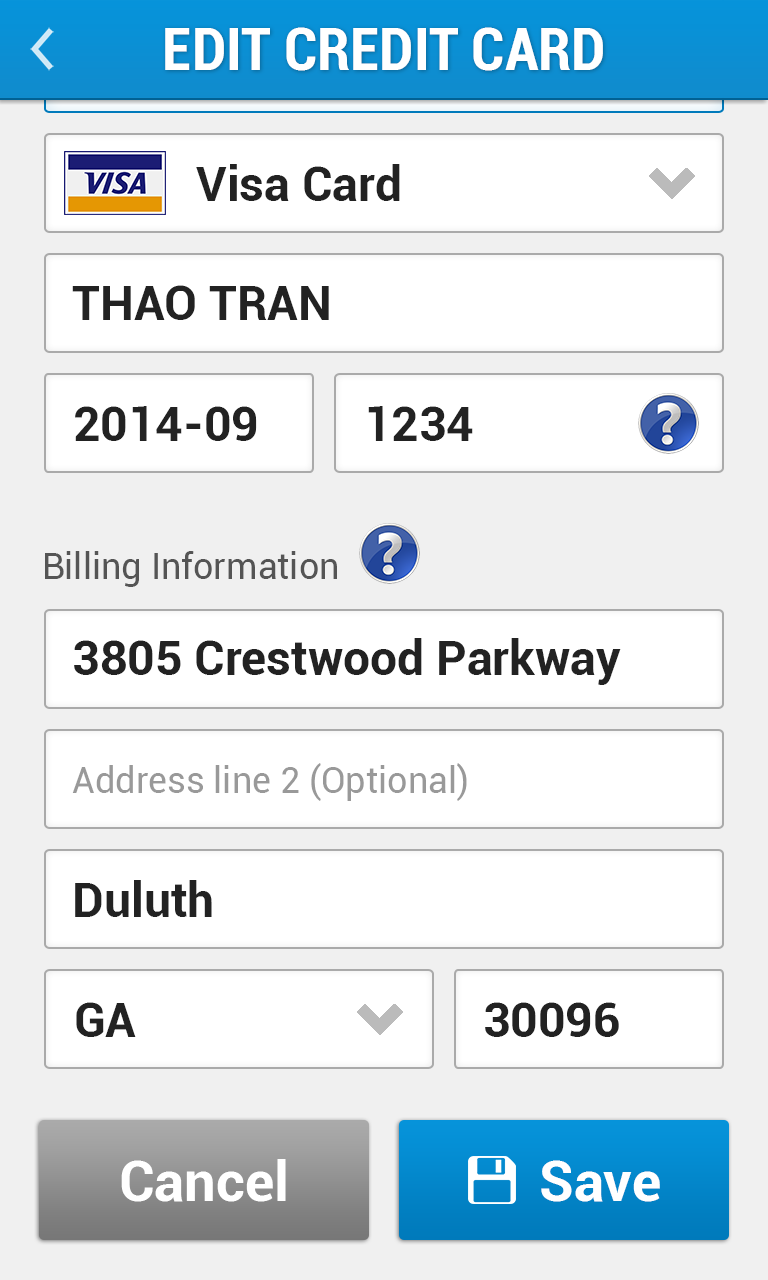
<style>
.page{position:relative;width:768px;height:1280px;background:#f0f0f0}
.page>*{position:absolute;margin:0}
.t1{font:60px "Roboto-BoldCondensed";color:#ffffff}
.t2{font:48px "Roboto-Bold";color:#222222}
.t3{font:36px "Roboto-Regular";color:#555555}
.t4{font:36px "Roboto-Regular";color:#999999}
.t5{font:56px "Roboto-Bold";color:#ffffff}
</style>
<div class="page">
<p class="t1" style="left:165px;top:27px;width:438px;height:44px">EDIT CREDIT CARD</p>
<p class="t2" style="left:196px;top:164px;width:204px;height:37px">Visa Card</p>
<p class="t2" style="left:72px;top:285px;width:257px;height:35px">THAO TRAN</p>
<p class="t2" style="left:75px;top:406px;width:182px;height:35px">2014-09</p>
<p class="t2" style="left:368px;top:406px;width:105px;height:35px">1234</p>
<p class="t3" style="left:45px;top:551px;width:292px;height:36px">Billing Information</p>
<p class="t2" style="left:74px;top:638px;width:547px;height:47px">3805 Crestwood Parkway</p>
<p class="t4" style="left:72px;top:763px;width:395px;height:38px">Address line 2 (Optional)</p>
<p class="t2" style="left:75px;top:880px;width:137px;height:37px">Duluth</p>
<p class="t2" style="left:76px;top:1002px;width:60px;height:35px">GA</p>
<p class="t2" style="left:485px;top:1002px;width:134px;height:35px">30096</p>
<p class="t5" style="left:121px;top:1159px;width:165px;height:43px">Cancel</p>
<p class="t5" style="left:541px;top:1160px;width:119px;height:42px">Save</p>
</div>
